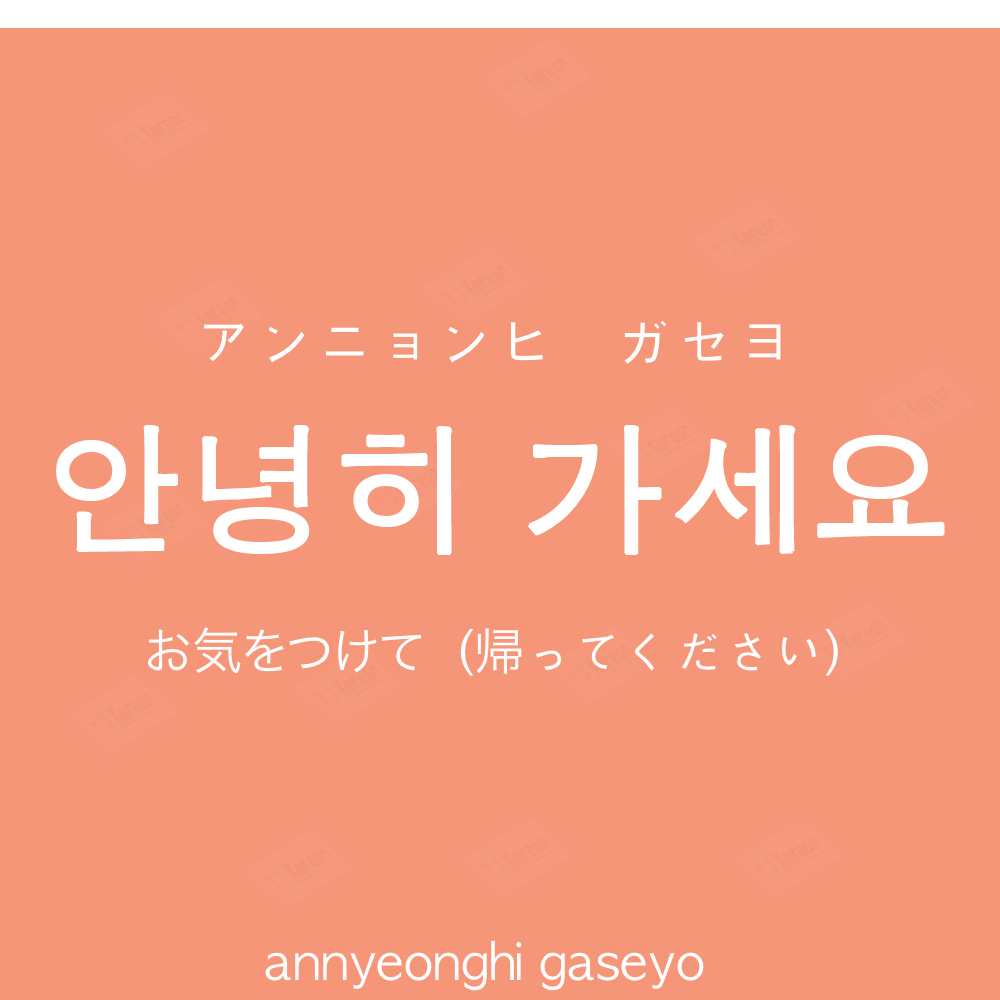
<style>
.page{position:relative;width:1000px;height:1000px;background:#f69679}
.page>*{position:absolute;margin:0}
.t1{font:60px "AppleGothic";color:#ffffff}
.t2{font:140px "AppleGothic";color:#ffffff;font-weight:bold}
.t3{font:50px "AppleGothic";color:#ffffff}
.t4{font:50px "HiraKakuProN-W3";color:#ffffff}
</style>
<div class="page">
<p class="t1" style="left:204px;top:321px;width:577px;height:43px">アンニョンヒ　ガセヨ</p>
<p class="t2" style="left:56px;top:425px;width:889px;height:130px">안녕히 가세요</p>
<p class="t3" style="left:148px;top:627px;width:690px;height:49px"><span class="t4">お気をつけて</span>（<span class="t4">帰</span>ってください）</p>
<p class="t3" style="left:265px;top:940px;width:439px;height:51px">annyeonghi gaseyo</p>
</div>
